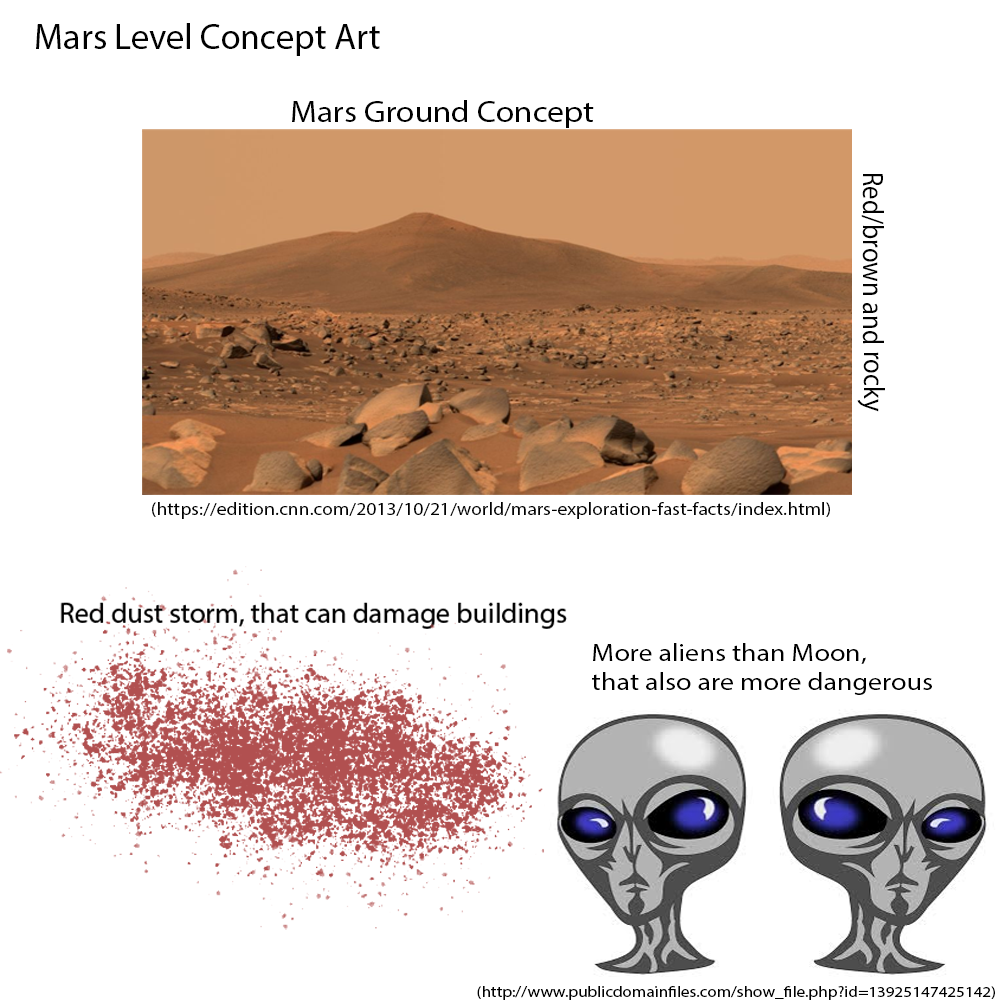
<style>
.page{position:relative;width:1000px;height:1000px;background:#ffffff}
.page>*{position:absolute;margin:0}
.t1{font:36px "MyriadPro-Regular";color:#010101}
.t2{font:30.1px "MyriadPro-Regular";color:#010101;scale:1.1 1}
.t3{font:29.4px "MyriadPro-Regular";color:#010101;scale:0.91 1}
.t4{font:17.8px "MyriadPro-Regular";color:#010101;scale:1.1 1}
.t5{font:24.8px "MyriadPro-Regular";color:#000000;scale:1.13 1}
.t6{font:15.1px "MyriadPro-Regular";color:#000000;scale:1.13 1}
</style>
<div class="page">
<p class="t1" style="left:36px;top:23px;width:344px;height:33px">Mars Level Concept Art</p>
<p class="t2" style="left:292px;top:100px;width:302px;height:28px">Mars Ground Concept</p>
<p class="t3" style="left:857px;top:174px;width:28px;height:238px;rotate:90deg">Red/brown and rocky</p>
<p class="t4" style="left:152px;top:502px;width:678px;height:17px">(https://edition.cnn.com/2013/10/21/world/mars-exploration-fast-facts/index.html)</p>
<p class="t5" style="left:592px;top:643px;width:340px;height:52px">More aliens than Moon,<br>that also are more dangerous</p>
<p class="t6" style="left:477px;top:986px;width:518px;height:14px">(http://www.publicdomainfiles.com/show_file.php?id=13925147425142)</p>
</div>
